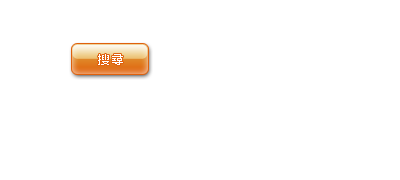
<style>
.page{position:relative;width:400px;height:180px;background:#ffffff}
.page>*{position:absolute;margin:0}
.t1{font:12px "MingLiU";color:#ffffff}
</style>
<div class="page">
<p class="t1" style="left:98px;top:54px;width:25px;height:11px">搜 尋</p>
</div>
